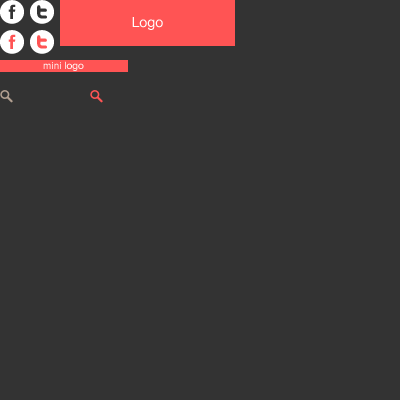
<style>
.page{position:relative;width:400px;height:400px;background:#333333}
.page>*{position:absolute;margin:0}
.t1{font:14px "HelveticaNeue";color:#ffffff}
.t2{font:10px "HelveticaNeue";color:#ffffff}
</style>
<div class="page">
<p class="t1" style="left:132px;top:17px;width:31px;height:13px">Logo</p>
<p class="t2" style="left:43px;top:61px;width:41px;height:10px">mini logo</p>
</div>
